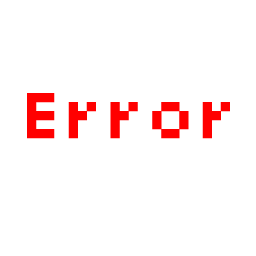
<style>
.page{position:relative;width:256px;height:256px;background:#ffffff}
.page>*{position:absolute;margin:0}
.t1{font:71.9px "04b03";letter-spacing:0.08em;color:#ff0000}
</style>
<div class="page">
<p class="t1" style="left:27px;top:93px;width:203px;height:46px">Error</p>
</div>
